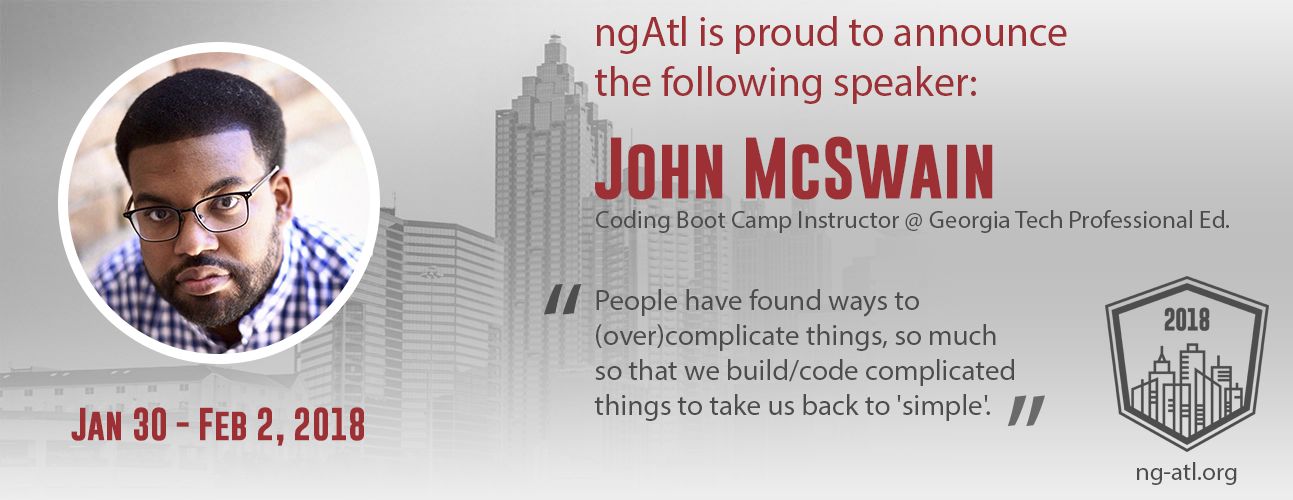
<style>
.page{position:relative;width:1293px;height:500px}
.page>*{position:absolute;margin:0}
.t1{font:41.7px "MyriadPro-Regular";color:#9d3035}
.t2{font:62.5px "GoboldBold";color:#9d3035}
.t3{font:25px "MyriadPro-Regular";color:#4d4d4e}
.t4{font:125px "MyriadPro-Regular";color:#4d4d4e}
.t5{font:29.2px "MyriadPro-Regular";color:#4d4d4e}
.t6{font:125px "MyriadPro-Regular";color:#6a6a6b}
.t7{font:33.3px "GoboldBold";color:#9d3035}
</style>
<div class="page">
<p class="t1" style="left:595px;top:16px;width:472px;height:88px">ngAtl is proud to announce the following speaker:</p>
<p class="t2" style="left:595px;top:136px;width:398px;height:64px">John McSwain</p>
<p class="t3" style="left:596px;top:210px;width:633px;height:23px">Coding Boot Camp Instructor @ Georgia Tech Professional Ed.</p>
<p class="t4" style="left:544px;top:283px;width:38px;height:32px">“</p>
<p class="t5" style="left:594px;top:289px;width:420px;height:132px">People have found ways to (over)complicate things, so much so that we build/code complicated things to take us back to 'simple'.</p>
<p class="t6" style="left:1007px;top:395px;width:38px;height:32px;rotate:180deg">“</p>
<p class="t7" style="left:71px;top:407px;width:293px;height:39px">Jan 30 - Feb 2, 2018</p>
<p class="t3" style="left:1137px;top:462px;width:100px;height:23px">ng-atl.org</p>
</div>
